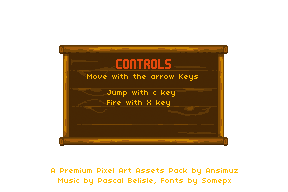
<style>
.page{position:relative;width:288px;height:192px;background:#ffffff}
.page>*{position:absolute;margin:0}
.t1{font:8.1px "04b03";color:#ffba00}
.t2{font:8.1px "04b03";color:#ffb900}
</style>
<div class="page">
<p class="t1" style="left:107px;top:90px;width:68px;height:17px;text-align:center">Jump with c key<br>Fire with X key</p>
<p class="t2" style="left:51px;top:168px;width:187px;height:17px;text-align:center">A Premium Pixel Art Assets Pack by Ansimuz<br>Music by Pascal Belisle, Fonts by Somepx</p>
</div>
